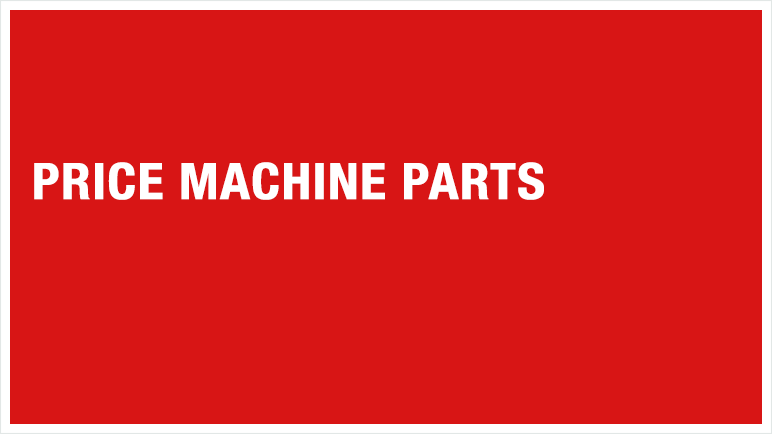
<style>
.page{position:relative;width:772px;height:434px;background:#d81515}
.page>*{position:absolute;margin:0}
.t1{font:50px "HelveticaNeue-CondensedBold";color:#ffffff;font-weight:bold;scale:1.07 1}
</style>
<div class="page">
<p class="t1" style="left:34px;top:162px;width:510px;height:38px">PRICE MACHINE PARTS</p>
</div>
